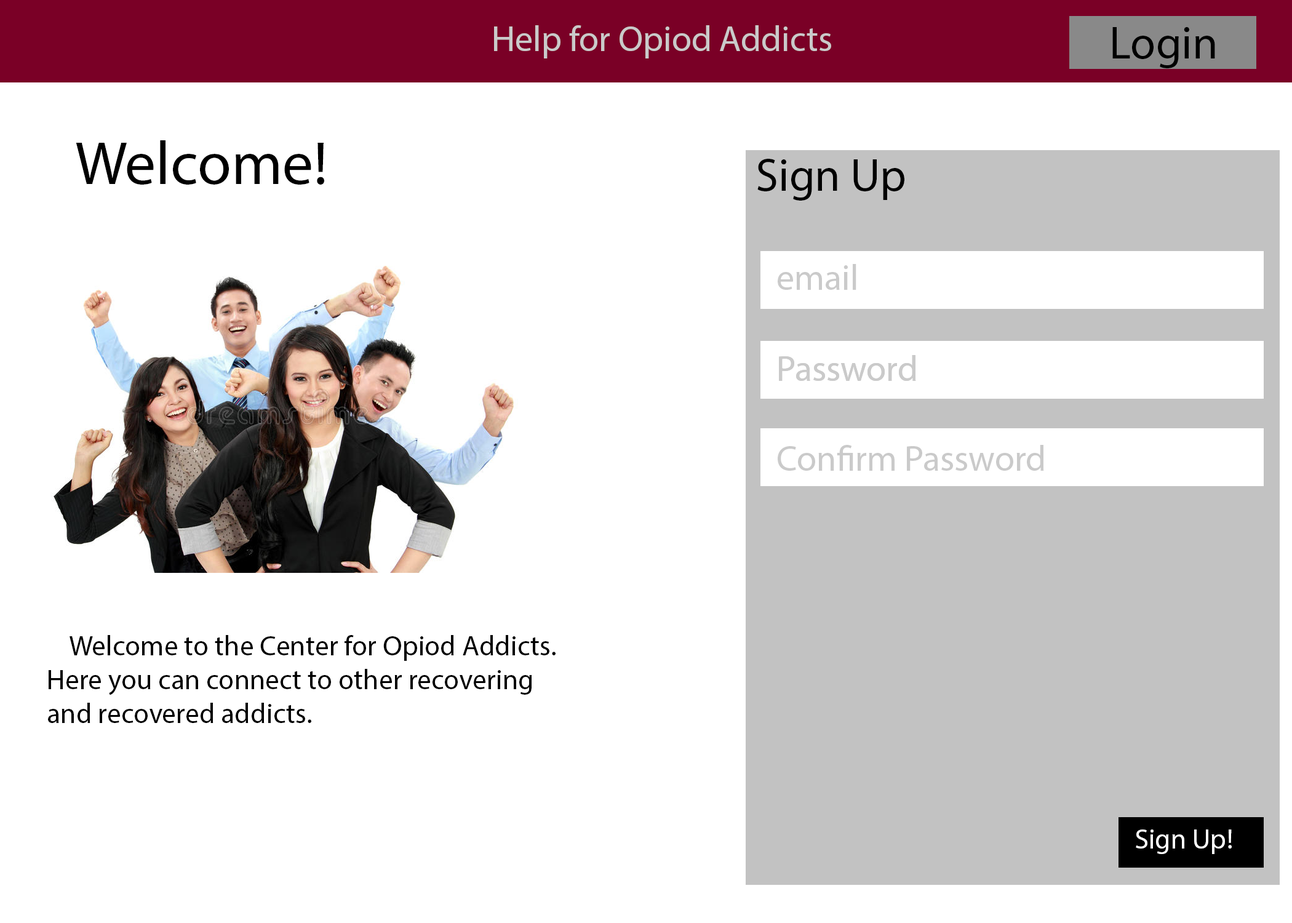
<style>
.page{position:relative;width:1292px;height:923px;background:#ffffff}
.page>*{position:absolute;margin:0}
.t1{font:35.9px "MyriadPro-Regular";color:#cacaca}
.t2{font:46.1px "MyriadPro-Regular";color:#000000}
.t3{font:61.5px "MyriadPro-Regular";color:#000000}
.t4{font:28.2px "MyriadPro-Regular";color:#010101}
.t5{font:28.2px "MyriadPro-Regular";color:#ffffff}
</style>
<div class="page">
<p class="t1" style="left:494px;top:25px;width:337px;height:33px">Help for Opiod Addicts</p>
<p class="t2" style="left:1112px;top:27px;width:103px;height:41px">Login</p>
<p class="t3" style="left:76px;top:140px;width:248px;height:45px">Welcome!</p>
<p class="t2" style="left:757px;top:159px;width:147px;height:42px">Sign Up</p>
<p class="t1" style="left:778px;top:264px;width:78px;height:26px">email</p>
<p class="t1" style="left:779px;top:355px;width:137px;height:26px">Password</p>
<p class="t1" style="left:779px;top:355px;width:137px;height:26px">Password</p>
<p class="t1" style="left:778px;top:445px;width:266px;height:26px">Confirm Password</p>
<p class="t4" style="left:48px;top:635px;width:508px;height:88px">Welcome to the Center for Opiod Addicts. Here you can connect to other recovering and recovered addicts.</p>
<p class="t5" style="left:1136px;top:829px;width:96px;height:25px">Sign Up!</p>
</div>
